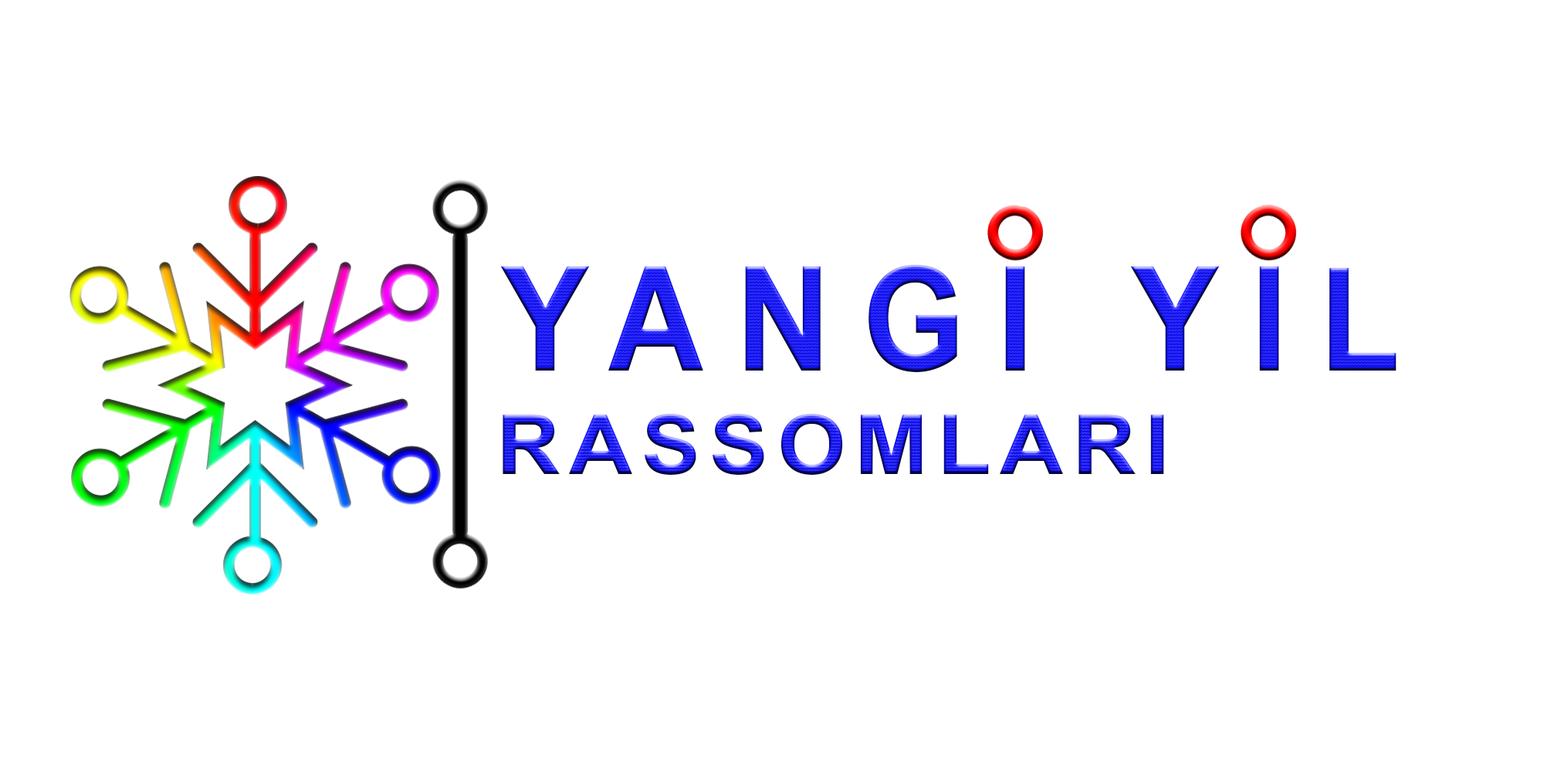
<style>
.page{position:relative;width:1544px;height:772px;background:#ffffff}
.page>*{position:absolute;margin:0}
.t1{font:144.9px "Arial-BoldMT";letter-spacing:0.24em;scale:0.91 1}
.t2{font:82.8px "Arial-BoldMT";letter-spacing:0.1em;scale:1.07 1}
</style>
<div class="page">
<p class="t1" style="left:500px;top:265px;width:897px;height:107px">YANGI YIL</p>
<p class="t2" style="left:503px;top:414px;width:661px;height:61px">RASSOMLARI</p>
</div>
